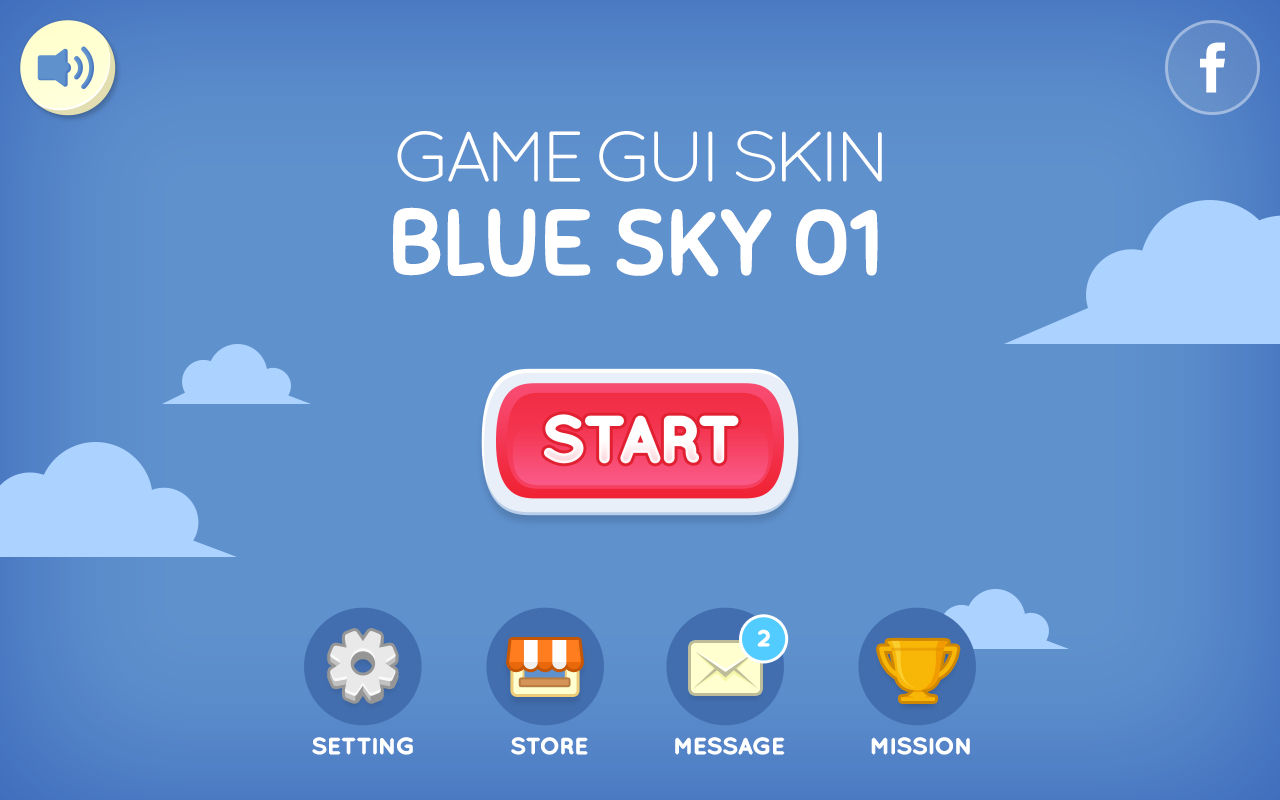
<style>
.page{position:relative;width:1280px;height:800px;background:#5f91cd}
.page>*{position:absolute;margin:0}
.t1{font:71.2px "QuicksandBook-Regular";letter-spacing:-0.1em;color:#ffffff;text-transform:uppercase;scale:1.05 1}
.t2{font:90.3px "Sniglet-Regular";letter-spacing:-0.01em;color:#ffffff;text-transform:uppercase;font-weight:bold}
.t3{font:22.8px "QuicksandBold-Regular";letter-spacing:-0.1em;color:#ffffff;font-weight:bold;scale:1.06 1}
</style>
<div class="page">
<p class="t1" style="left:397px;top:130px;width:485px;height:52px">Game GUI sKIN</p>
<p class="t2" style="left:393px;top:207px;width:485px;height:70px">Blue Sky 01</p>
<p class="t3" style="left:757px;top:629px;width:13px;height:18px">2</p>
<p class="t3" style="left:312px;top:737px;width:101px;height:18px">SETTING</p>
<p class="t3" style="left:511px;top:737px;width:77px;height:18px">STORE</p>
<p class="t3" style="left:675px;top:737px;width:110px;height:18px">MESSAGE</p>
<p class="t3" style="left:871px;top:737px;width:99px;height:18px">MISSION</p>
</div>
